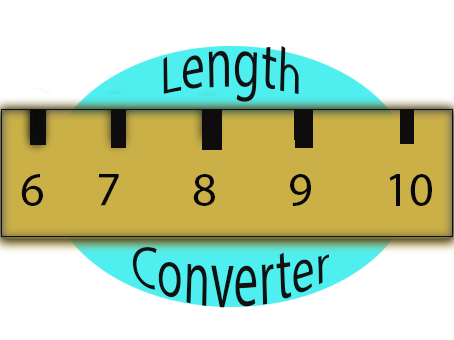
<style>
.page{position:relative;width:454px;height:340px;background:#ffffff}
.page>*{position:absolute;margin:0}
.t1{font:48px "MyriadHebrew-Regular";color:#101111}
.t2{font:48px "MyriadHebrew-Regular";color:#070707}
</style>
<div class="page">
<p class="t1" style="left:163px;top:45px;width:136px;height:57px">Length</p>
<p class="t2" style="left:21px;top:174px;width:411px;height:32px">10       9       8       7     6</p>
<p class="t1" style="left:132px;top:247px;width:197px;height:61px">Converter</p>
</div>
